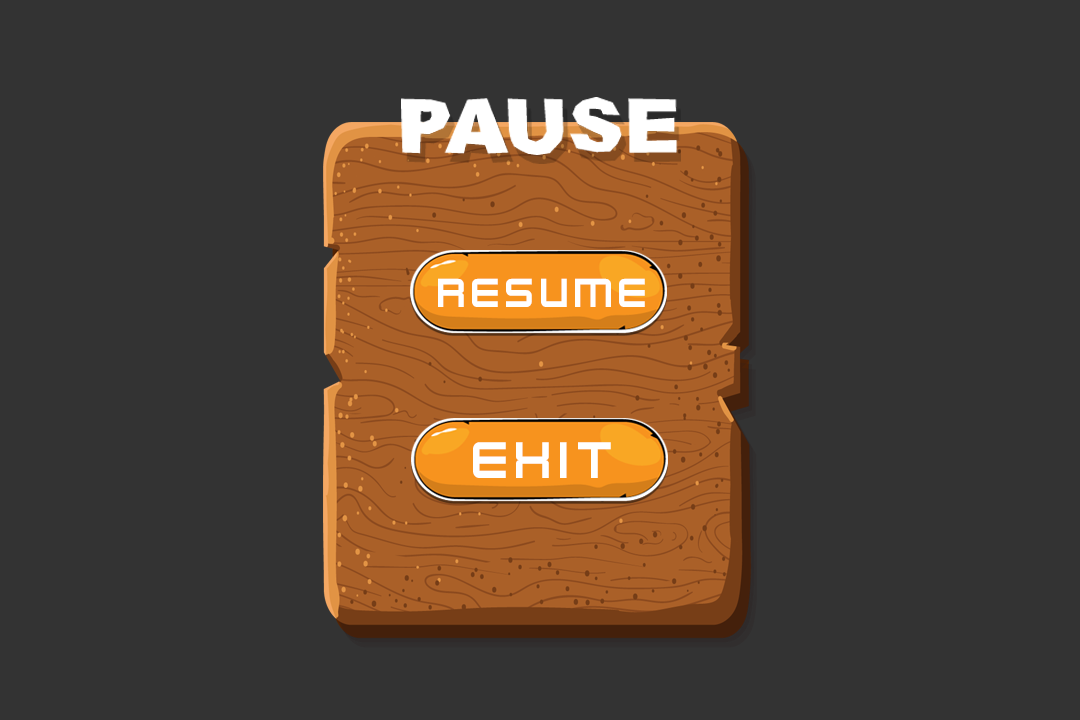
<style>
.page{position:relative;width:1080px;height:720px;background:#333333}
.page>*{position:absolute;margin:0}
.t1{font:45px "KenVector-Future";color:#ffffff;scale:0.91 1}
.t2{font:57.3px "KenVector-Future";color:#ffffff;scale:0.91 1}
</style>
<div class="page">
<p class="t1" style="left:438px;top:278px;width:207px;height:29px">resume</p>
<p class="t2" style="left:473px;top:442px;width:138px;height:36px">exit</p>
</div>
